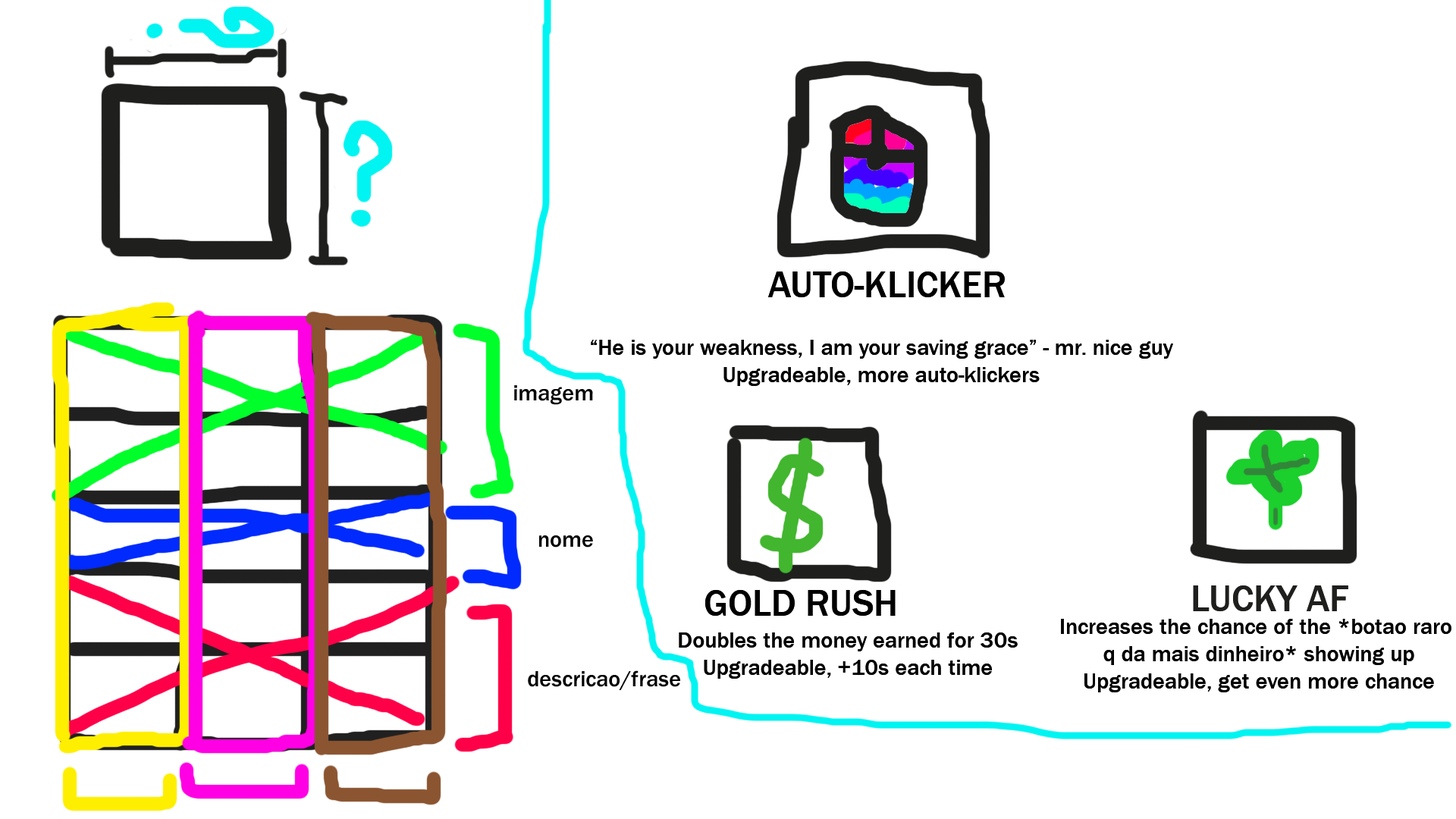
<style>
.page{position:relative;width:1456px;height:819px;background:#ffffff}
.page>*{position:absolute;margin:0}
.t1{font:37.9px "FranklinGothic-Medium";color:#000000}
.t2{font:22.7px "FranklinGothic-Medium";color:#000000}
.t3{font:37.9px "FranklinGothic-Medium";color:#1f1f1e}
</style>
<div class="page">
<p class="t1" style="left:768px;top:271px;width:237px;height:26px">AUTO-KLICKER</p>
<p class="t2" style="left:591px;top:340px;width:582px;height:46px;text-align:center">“He is your weakness, I am your saving grace” - mr. nice guy<br>Upgradeable, more auto-klickers</p>
<p class="t2" style="left:514px;top:385px;width:79px;height:20px">imagem</p>
<p class="t2" style="left:539px;top:535px;width:54px;height:13px">nome</p>
<p class="t1" style="left:705px;top:590px;width:191px;height:26px">GOLD RUSH</p>
<p class="t3" style="left:1193px;top:585px;width:155px;height:26px">LUCKY AF</p>
<p class="t2" style="left:1061px;top:619px;width:390px;height:73px;text-align:center">Increases the chance of the *botao raro <br>q da mais dinheiro* showing up<br>Upgradeable, get even more chance</p>
<p class="t2" style="left:679px;top:632px;width:339px;height:47px;text-align:center">Doubles the money earned for 30s<br>Upgradeable, +10s each time</p>
<p class="t2" style="left:528px;top:670px;width:152px;height:20px">descricao/frase</p>
</div>
